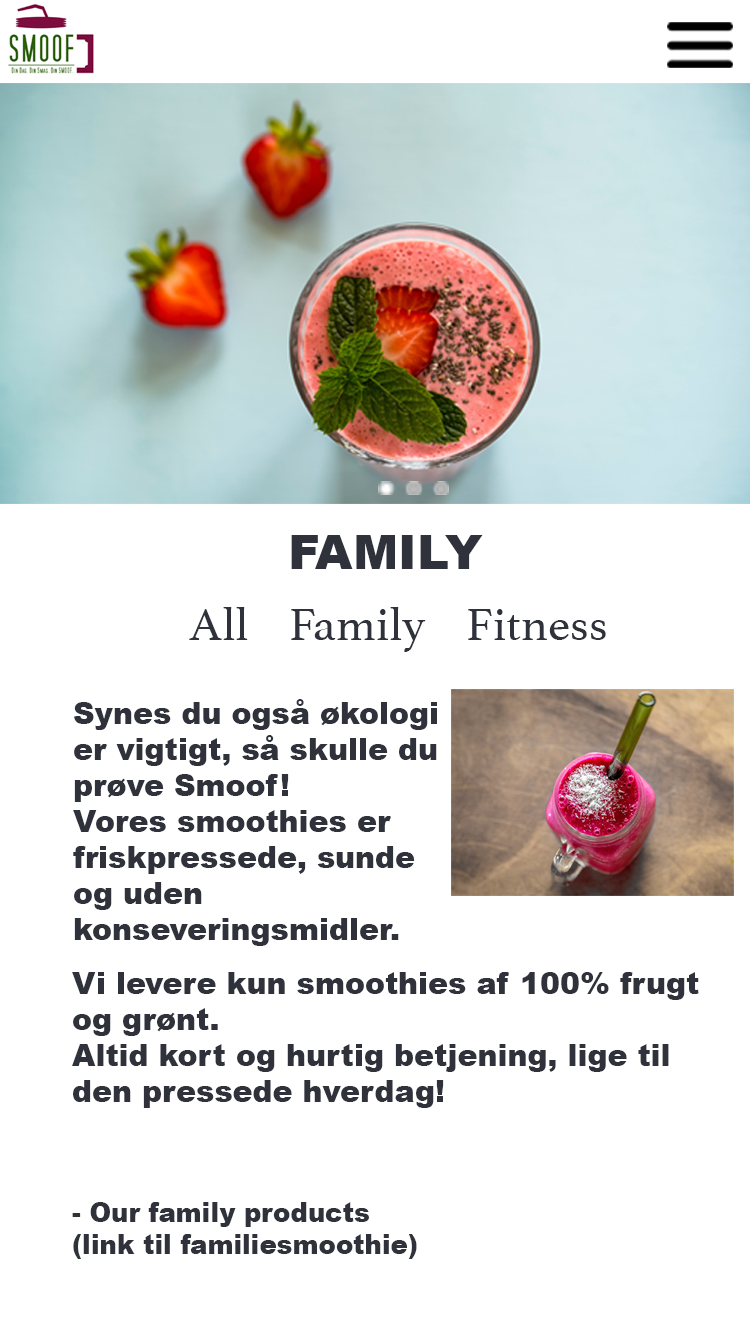
<style>
.page{position:relative;width:750px;height:1334px;background:#ffffff}
.page>*{position:absolute;margin:0}
.t1{font:48px "Arial-Black";color:#2f323a}
.t2{font:48px "Athelas-Regular";color:#2f323a}
.t3{font:30px "Arial-Black";color:#2f323a}
.t4{font:26.6px "Arial-Black";color:#2f323a}
</style>
<div class="page">
<p class="t1" style="left:291px;top:535px;width:192px;height:34px">FAMILY</p>
<p class="t2" style="left:189px;top:607px;width:417px;height:45px">All    Family    Fitness</p>
<p class="t3" style="left:73px;top:699px;width:364px;height:247px">Synes du også økologi er vigtigt, så skulle du prøve Smoof! <br>Vores smoothies er friskpressede, sunde og uden konseveringsmidler.</p>
<p class="t3" style="left:72px;top:972px;width:627px;height:136px">Vi levere kun smoothies af 100% frugt og grønt.<br>Altid kort og hurtig betjening, lige til den pressede hverdag!</p>
<p class="t4" style="left:72px;top:1202px;width:345px;height:57px">- Our family products (link til familiesmoothie)</p>
</div>
